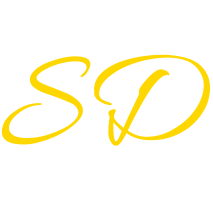
<style>
.page{position:relative;width:213px;height:198px;background:#ffffff}
.page>*{position:absolute;margin:0}
.t1{font:140px "Allura-Regular";color:#ffd700}
</style>
<div class="page">
<p class="t1" style="left:94px;top:54px;width:116px;height:92px">D</p>
<p class="t1" style="left:1px;top:56px;width:90px;height:89px">S</p>
</div>
